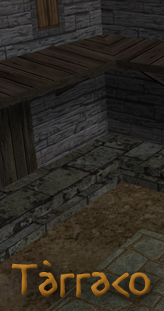
<style>
.page{position:relative;width:164px;height:311px}
.page>*{position:absolute;margin:0}
.t1{font:43.6px "Diogenes";color:#ad6f1e}
.t2{font:39.3px "Diogenes";color:#ad6f1e}
</style>
<div class="page">
<p class="t1" style="left:11px;top:260px;width:140px;height:38px"><span class="t2">T</span>àrraco</p>
</div>
